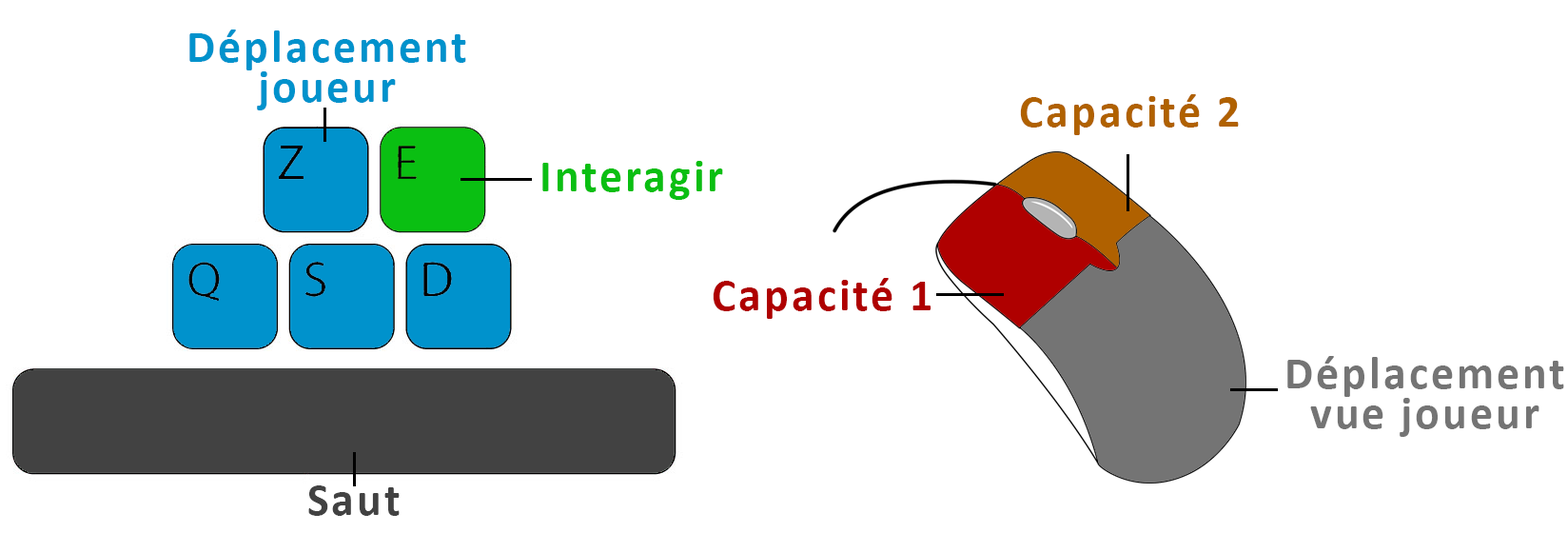
<style>
.page{position:relative;width:1568px;height:533px;background:#ffffff}
.page>*{position:absolute;margin:0}
.t1{font:45.7px/40px "Calibri-Bold";letter-spacing:0.062em;color:#0092cc}
.t2{font:45.7px "Calibri-Bold";letter-spacing:0.062em;color:#b06100}
.t3{font:45.7px "Calibri-Bold";letter-spacing:0.062em;color:#0abf12}
.t4{font:45.7px "Calibri-Bold";letter-spacing:0.062em;color:#af0000}
.t5{font:45.7px/40px "Calibri-Bold";letter-spacing:0.062em;color:#747474}
.t6{font:45.7px "Calibri-Bold";letter-spacing:0.062em;color:#424242}
</style>
<div class="page">
<p class="t1" style="left:189px;top:29px;width:277px;height:81px;text-align:center">Déplacement joueur</p>
<p class="t2" style="left:1020px;top:94px;width:219px;height:41px">Capacité 2</p>
<p class="t3" style="left:542px;top:161px;width:181px;height:39px">Interagir</p>
<p class="t4" style="left:713px;top:278px;width:218px;height:41px">Capacité 1</p>
<p class="t5" style="left:1287px;top:356px;width:277px;height:81px;text-align:center">Déplacement vue joueur</p>
<p class="t6" style="left:308px;top:485px;width:92px;height:31px">Saut</p>
</div>
